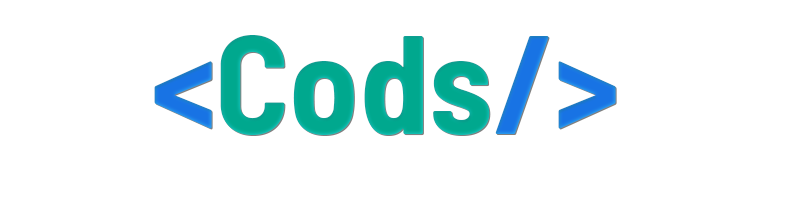
<style>
.page{position:relative;width:800px;height:200px;background:#ffffff}
.page>*{position:absolute;margin:0}
.t1{font:138.9px "BarlowSemiCondensed-Bold";color:#00a88e}
.t2{font:138.9px "BarlowSemiCondensed-Bold";color:#1873e4}
</style>
<div class="page">
<p class="t1" style="left:154px;top:35px;width:462px;height:100px"><span class="t2">&lt;</span>Cods<span class="t2">/&gt;</span></p>
</div>
